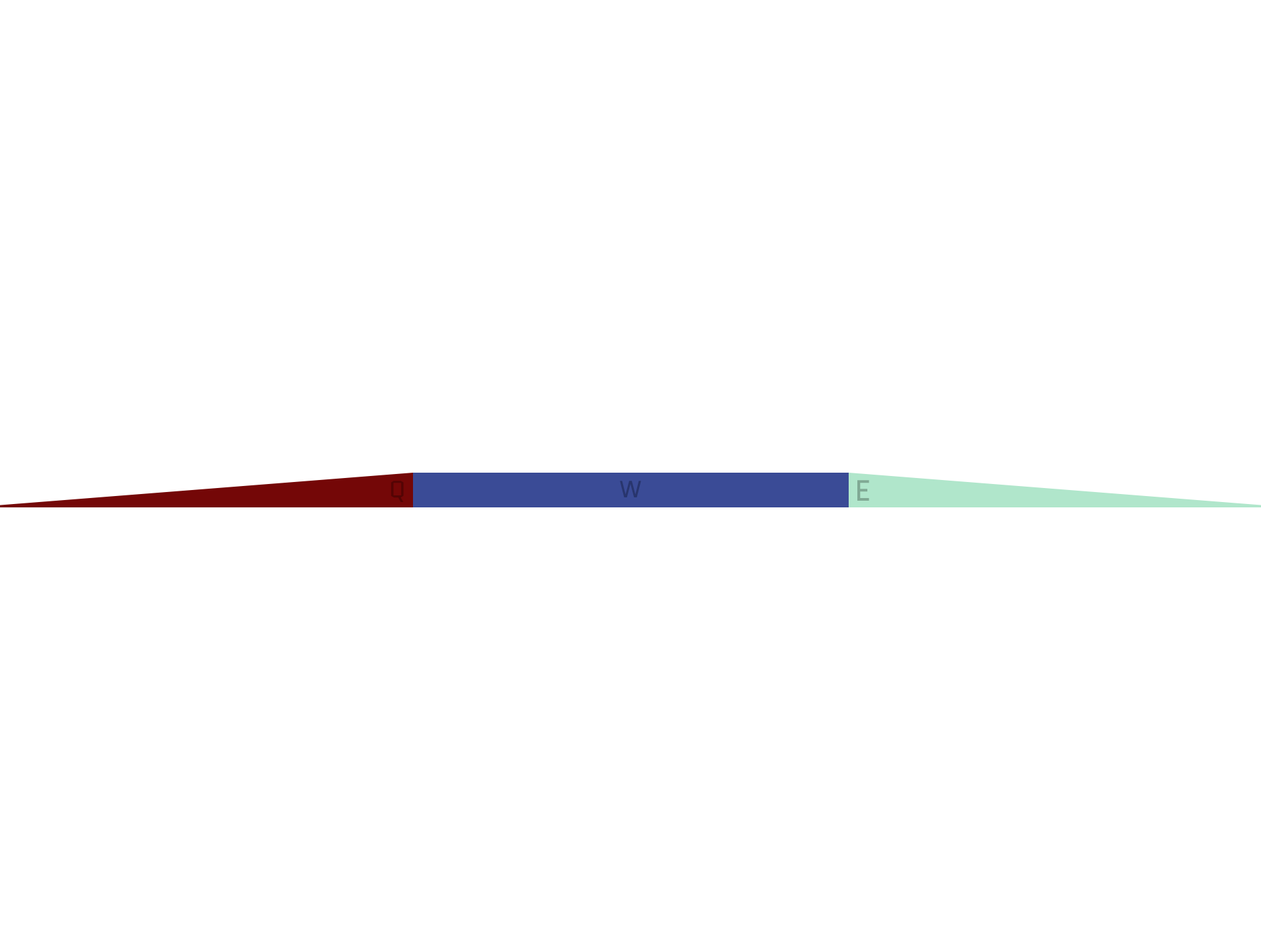
<style>
.page{position:relative;width:1261px;height:946px;background:#ffffff}
.page>*{position:absolute;margin:0}
.t1{font:23.6px "Quantico-Regular";color:#530404}
.t2{font:23.7px "Quantico-Regular";color:#28356d}
.t3{font:29.3px "Quantico-Regular";color:#80a994}
</style>
<div class="page">
<p class="t1" style="left:391px;top:480px;width:13px;height:22px">Q</p>
<p class="t2" style="left:620px;top:480px;width:21px;height:17px">W</p>
<p class="t3" style="left:857px;top:480px;width:12px;height:20px">E</p>
</div>
